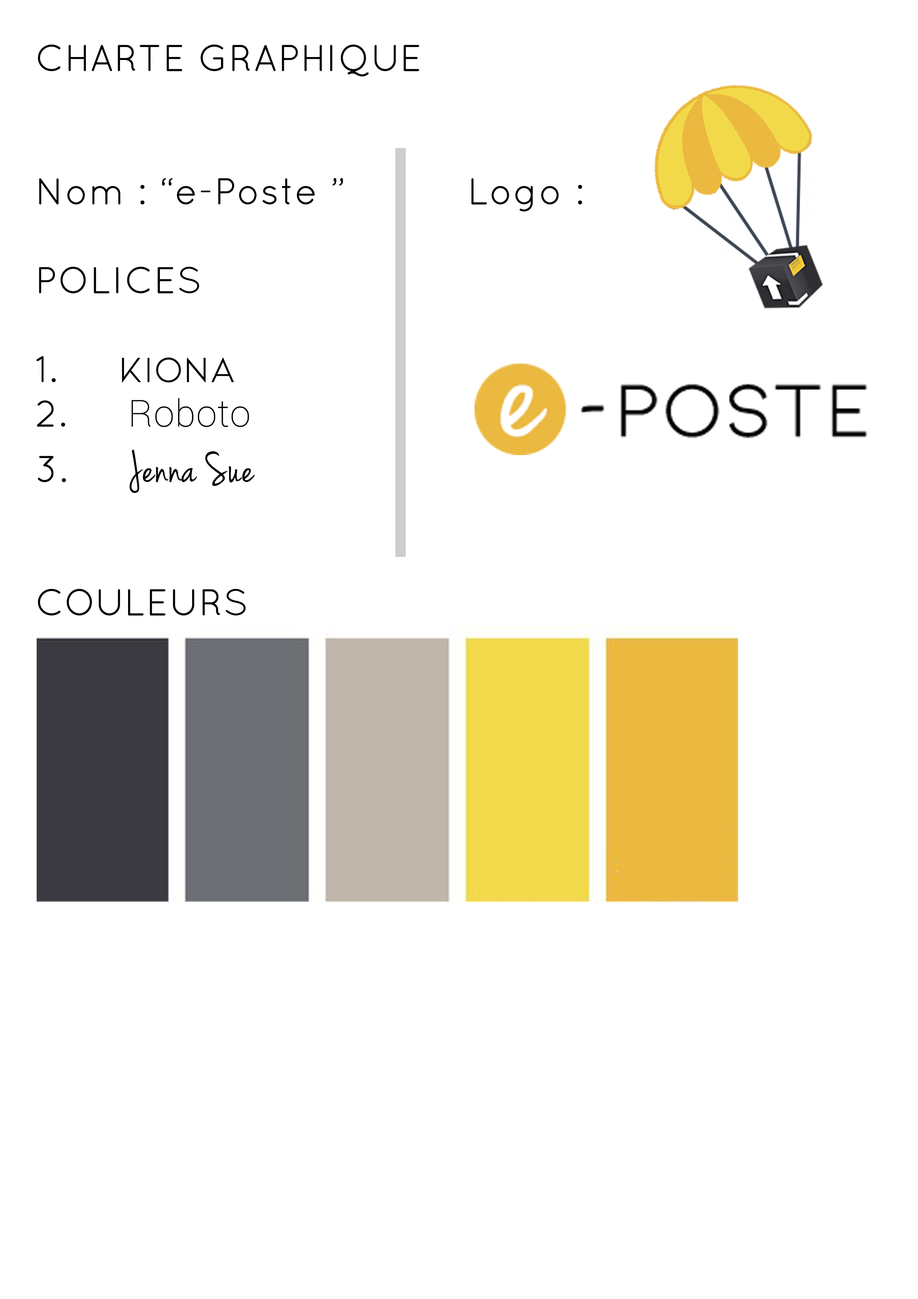
<style>
.page{position:relative;width:918px;height:1299px;background:#ffffff}
.page>*{position:absolute;margin:0}
.t1{font:37px "QuicksandBook-Regular";color:#000000;font-weight:bold}
.t2{font:37px "Kiona-Regular";color:#000000;font-weight:bold}
.t3{font:37px "Roboto-Thin";color:#000000;font-weight:bold}
.t4{font:46.3px "JennaSue";color:#000000;font-weight:bold}
</style>
<div class="page">
<p class="t1" style="left:36px;top:44px;width:546px;height:572px">CHARTE GRAPHIQUE<br><br><br>Nom : “e-Poste ”          Logo :<br><br>POLICES<br><br>1.     <span class="t2">KIONA<br></span>2.     <span class="t3">Roboto<br></span>3.     <span class="t4">Jenna Sue<br></span><br><br>COULEURS</p>
</div>
